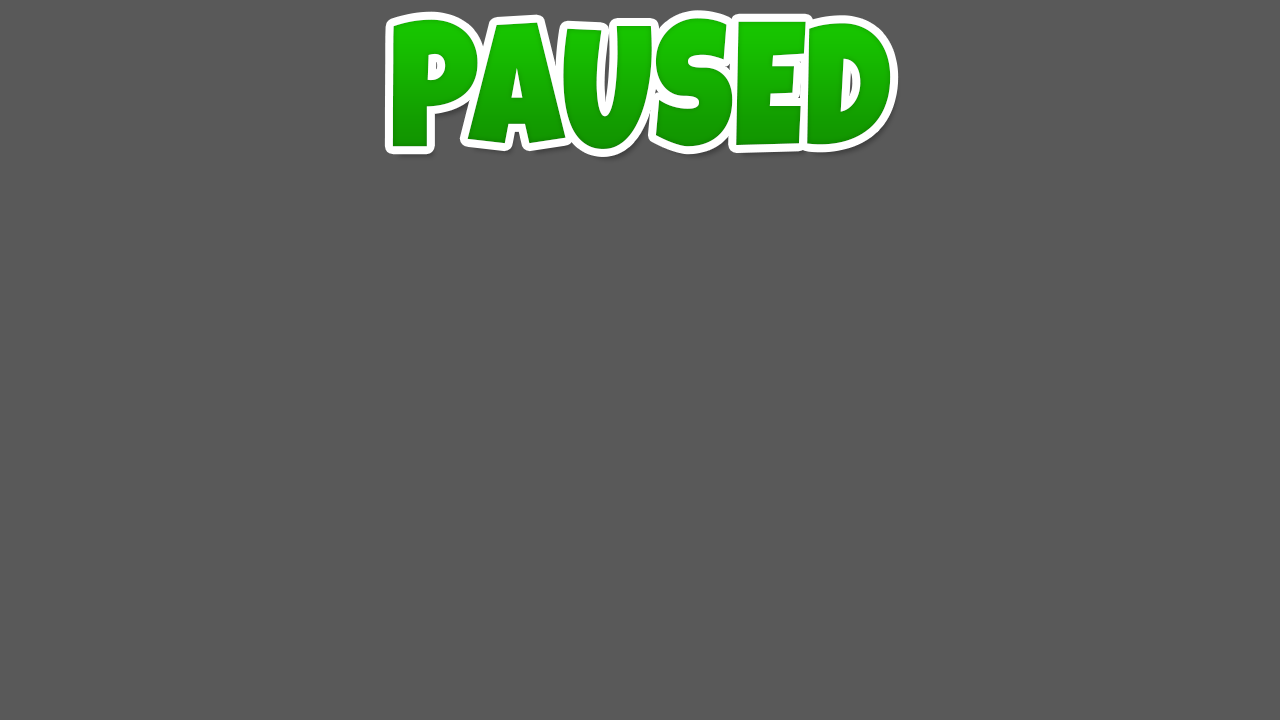
<style>
.page{position:relative;width:1280px;height:720px;background:#595959}
.page>*{position:absolute;margin:0}
.t1{font:175px "LuckiestGuy-Regular";color:#14ac00;text-transform:uppercase;scale:0.85 1}
</style>
<div class="page">
<p class="t1" style="left:392px;top:18px;width:499px;height:131px">paused</p>
</div>
